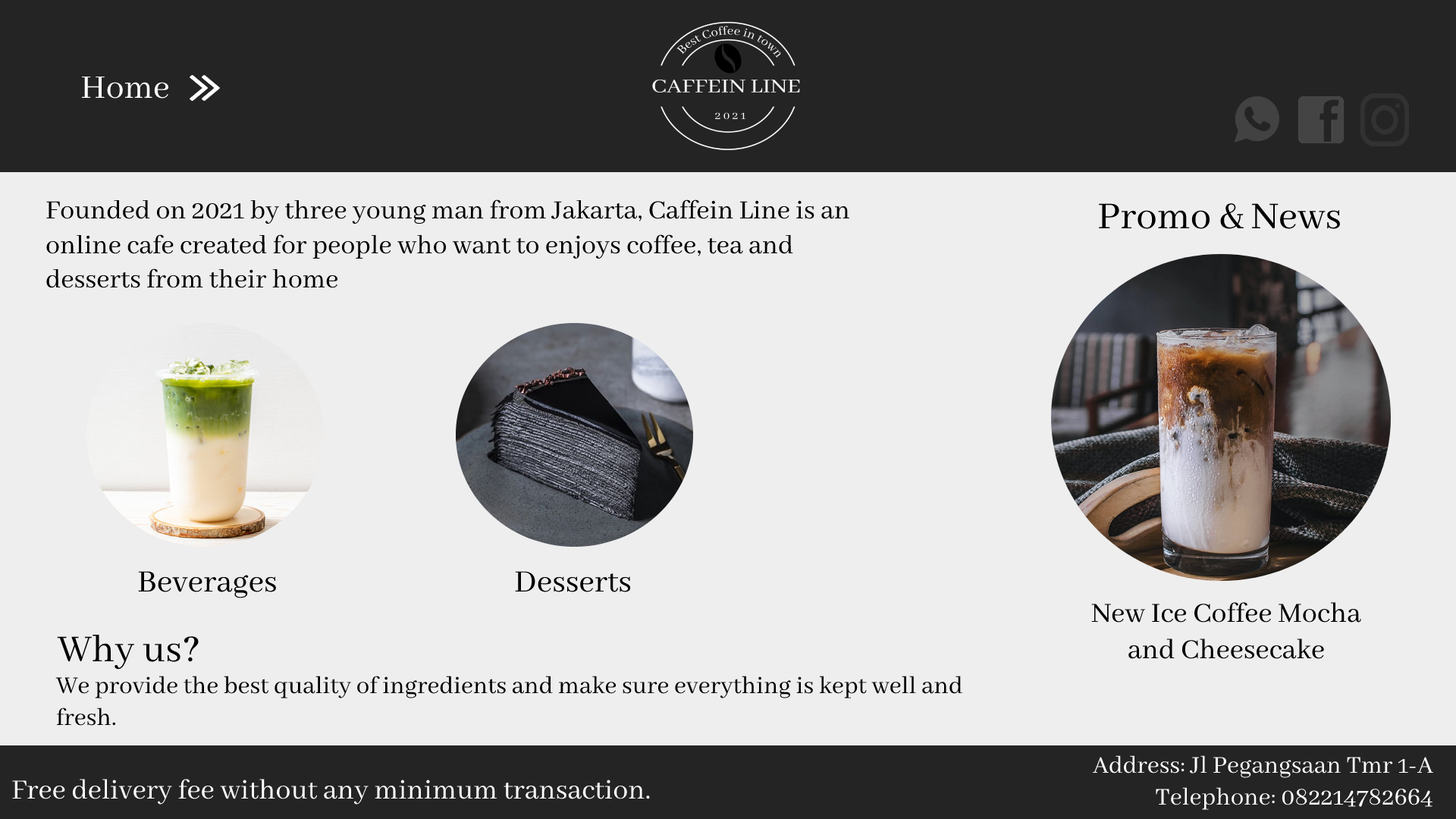
<style>
.page{position:relative;width:1456px;height:819px;background:#eeeeee}
.page>*{position:absolute;margin:0}
.t1{font:36.4px "AbhayaLibre-Regular";color:#ffffff}
.t2{font:28.8px "AbhayaLibre-Regular";color:#000000}
.t3{font:41.7px "AbhayaLibre-Regular";color:#000000}
.t4{font:34.1px "AbhayaLibre-Regular";color:#000000}
.t5{font:30.3px "AbhayaLibre-Regular";color:#000000}
.t6{font:26.5px "AbhayaLibre-Regular";color:#000000}
.t7{font:26.5px "AbhayaLibre-Regular";color:#ffffff}
.t8{font:30.3px "AbhayaLibre-Regular";color:#ffffff}
</style>
<div class="page">
<p class="t1" style="left:81px;top:76px;width:88px;height:23px">Home</p>
<p class="t2" style="left:46px;top:199px;width:804px;height:89px">Founded on 2021 by three young man from Jakarta, Caffein Line is an online cafe created for people who want to enjoys coffee, tea and desserts from their home</p>
<p class="t3" style="left:1099px;top:203px;width:241px;height:26px">Promo &amp; News</p>
<p class="t4" style="left:138px;top:571px;width:138px;height:27px">Beverages</p>
<p class="t4" style="left:515px;top:571px;width:116px;height:21px">Desserts</p>
<p class="t5" style="left:1091px;top:602px;width:270px;height:57px;text-align:center">New Ice Coffee Mocha and Cheesecake</p>
<p class="t3" style="left:57px;top:635px;width:142px;height:35px">Why us?</p>
<p class="t6" style="left:55px;top:676px;width:907px;height:50px">We provide the best quality of ingredients and make sure everything is kept well and fresh.</p>
<p class="t7" style="left:1093px;top:755px;width:340px;height:55px;text-align:right">Address: Jl Pegangsaan Tmr 1-A<br>Telephone: 082214782664</p>
<p class="t8" style="left:12px;top:779px;width:638px;height:26px">Free delivery fee without any minimum transaction.</p>
</div>
